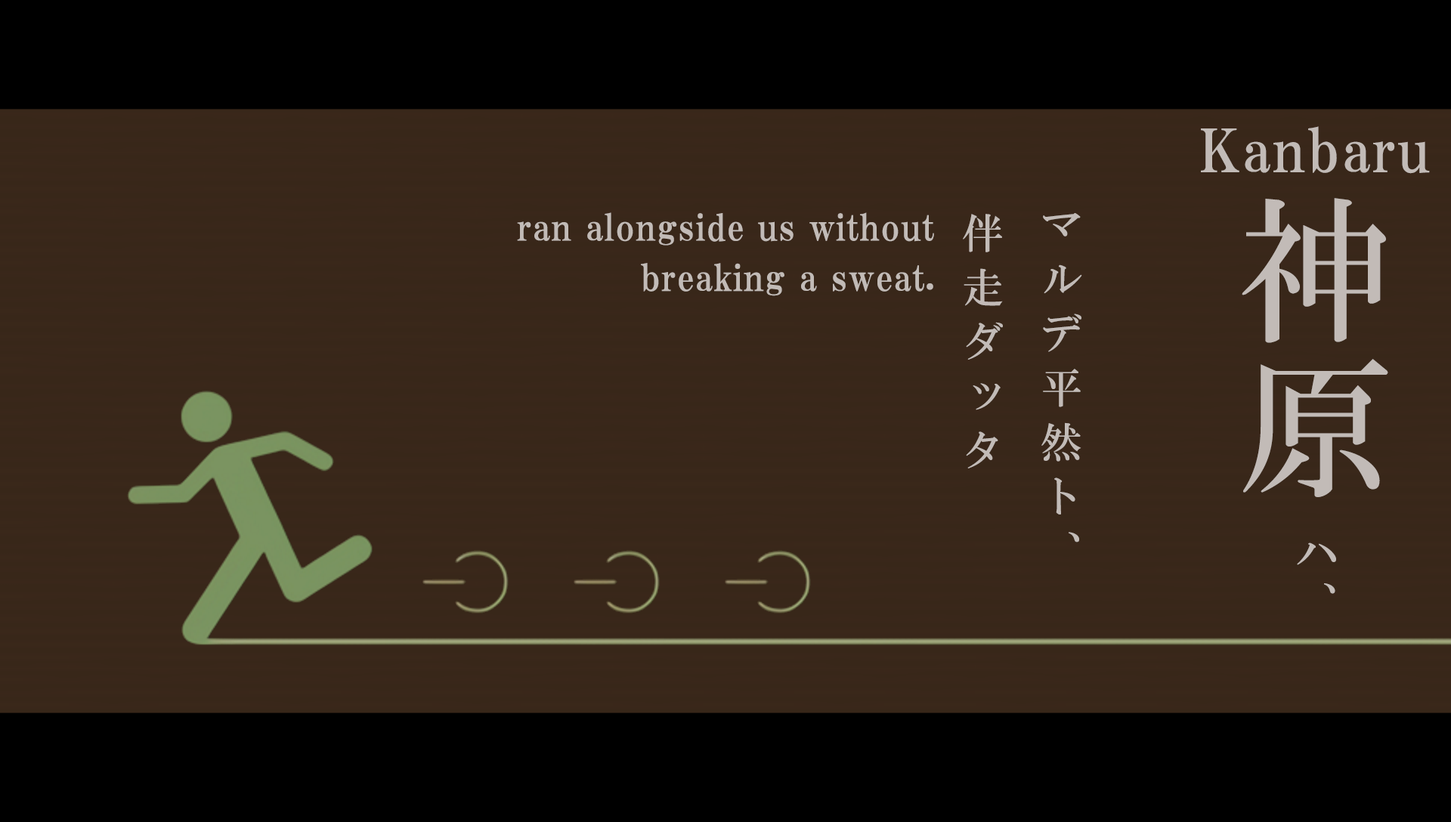
<style>
.page{position:relative;width:1451px;height:822px;background:#39271a}
.page>*{position:absolute;margin:0}
.t1{font:59.4px "HGPMinchoE";letter-spacing:0.025em;color:#c2bbb7}
.t2{font:59.4px "HGPMinchoE";letter-spacing:0.01em;color:#c2bbb7}
.t3{font:153.4px/209.3px "HGMinchoB";letter-spacing:0.01em;color:#c2bbb7}
.t4{font:43.1px/209.3px "HGMinchoB";letter-spacing:0.13em;color:#c2bbb7}
.t5{font:43.1px/209.3px "HGMinchoB";letter-spacing:0.75em;color:#c2bbb7}
.t6{font:36.3px/50.4px "HGPMinchoE";letter-spacing:0.025em;color:#c2bbb7}
.t7{font:41.6px/78.6px "HGMinchoB";letter-spacing:0.31em;color:#c2bbb7}
</style>
<div class="page">
<p class="t1" style="left:1201px;top:126px;width:228px;height:48px"><span class="t2"> </span>Kanbaru</p>
<p class="t3" style="left:1241px;top:198px;width:147px;height:396px">神原 <span class="t4">ハ</span><span class="t5">、</span></p>
<p class="t6" style="left:517px;top:212px;width:417px;height:84px;text-align:right">ran alongside us without<br>breaking a sweat.</p>
<p class="t7" style="left:963px;top:213px;width:119px;height:329px">マルデ平然ト、<br> 伴走ダッタ</p>
</div>
